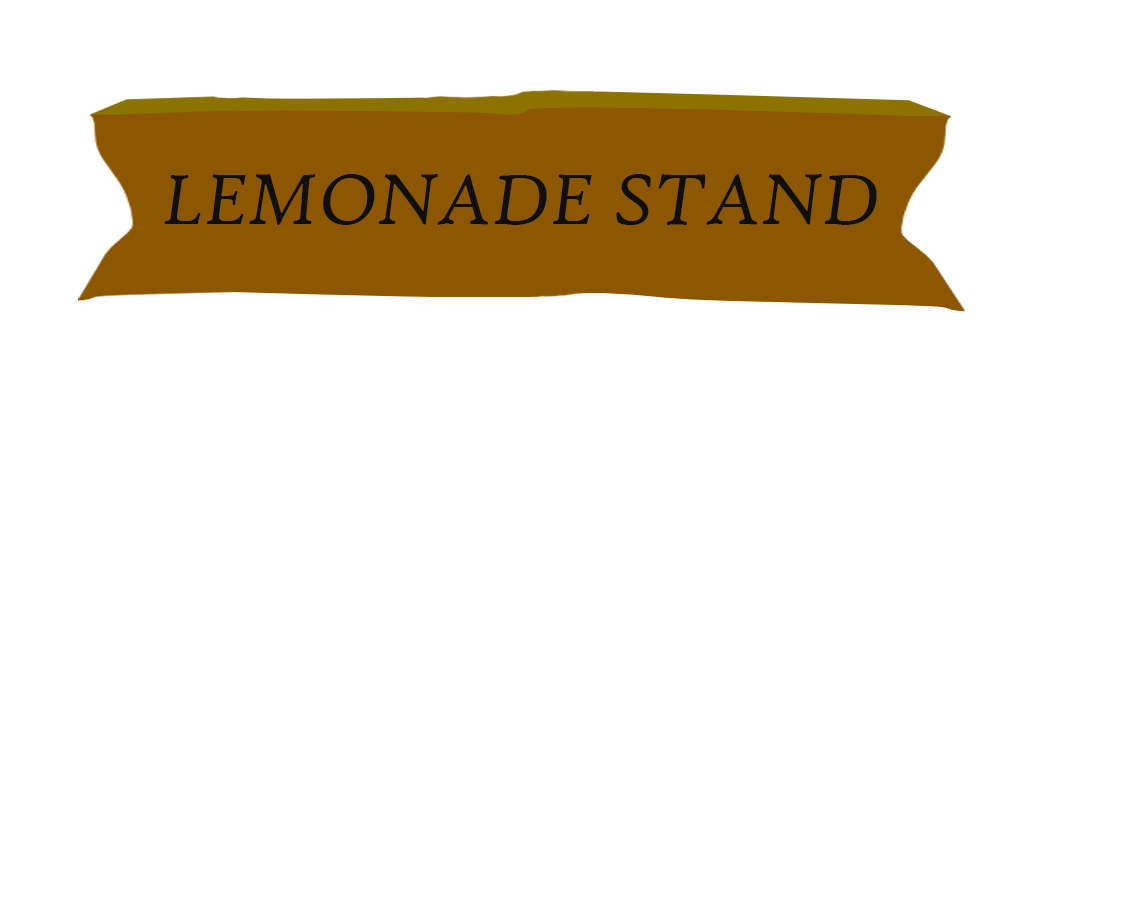
<style>
.page{position:relative;width:1134px;height:907px;background:#ffffff}
.page>*{position:absolute;margin:0}
.t1{font:75.6px "HighTowerText-Italic";color:#0f0f0f}
</style>
<div class="page">
<p class="t1" style="left:164px;top:174px;width:713px;height:51px">LEMONADE STAND</p>
</div>
